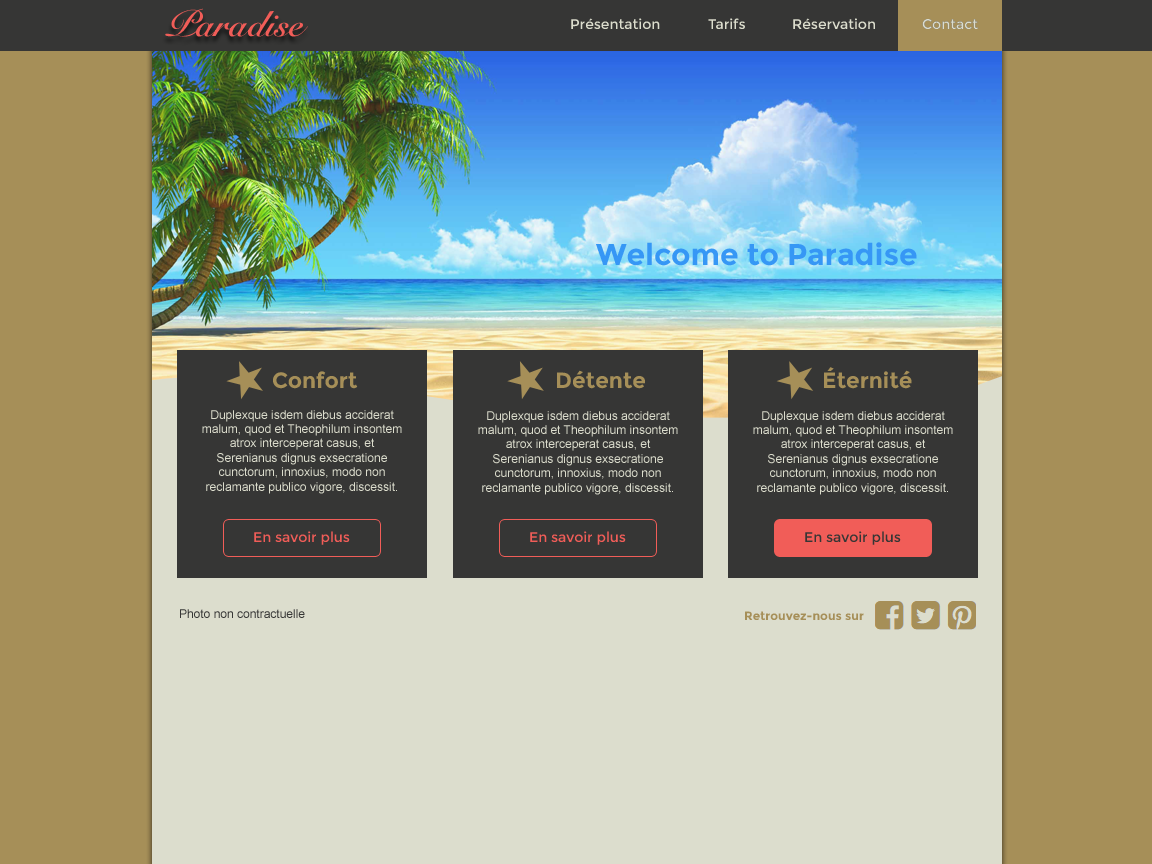
<style>
.page{position:relative;width:1152px;height:864px;background:#dcddcd}
.page>*{position:absolute;margin:0}
.t1{font:36px "SnellRoundhand-Bold";color:#f15d58}
.t2{font:14px "Montserrat-Regular";color:#dcddcd}
.t3{font:30px "Montserrat-Bold";color:#3697f5}
.t4{font:22px "Montserrat-Bold";color:#a68f58}
.t5{font:12px "ArialMT";color:#dcddcd}
.t6{font:14px "Montserrat-Regular";color:#f15d58}
.t7{font:14px "Montserrat-Regular";color:#f15d58;text-transform:uppercase}
.t8{font:14px "Montserrat-Regular";color:#363635}
.t9{font:14px "Montserrat-Regular";color:#363635;text-transform:uppercase}
.t10{font:12px "ArialMT";color:#363635}
.t11{font:12px "Montserrat-Bold";color:#a68f58}
</style>
<div class="page">
<p class="t1" style="left:165px;top:8px;width:143px;height:29px">Paradise</p>
<p class="t2" style="left:571px;top:18px;width:89px;height:11px">Présentation</p>
<p class="t2" style="left:708px;top:18px;width:37px;height:11px">Tarifs</p>
<p class="t2" style="left:793px;top:18px;width:82px;height:11px">Réservation</p>
<p class="t2" style="left:922px;top:19px;width:56px;height:10px">Contact</p>
<p class="t2" style="left:922px;top:19px;width:56px;height:10px">Contact</p>
<p class="t3" style="left:596px;top:242px;width:321px;height:24px">Welcome to Paradise</p>
<p class="t4" style="left:273px;top:371px;width:85px;height:18px">Confort</p>
<p class="t4" style="left:557px;top:370px;width:88px;height:19px">Détente</p>
<p class="t4" style="left:824px;top:367px;width:88px;height:22px">Éternité</p>
<p class="t5" style="left:202px;top:410px;width:200px;height:84px;text-align:center">Duplexque isdem diebus acciderat malum, quod et Theophilum insontem atrox interceperat casus, et Serenianus dignus exsecratione cunctorum, innoxius, modo non reclamante publico vigore, discessit.</p>
<p class="t5" style="left:478px;top:411px;width:200px;height:84px;text-align:center">Duplexque isdem diebus acciderat malum, quod et Theophilum insontem atrox interceperat casus, et Serenianus dignus exsecratione cunctorum, innoxius, modo non reclamante publico vigore, discessit.</p>
<p class="t5" style="left:753px;top:411px;width:200px;height:84px;text-align:center">Duplexque isdem diebus acciderat malum, quod et Theophilum insontem atrox interceperat casus, et Serenianus dignus exsecratione cunctorum, innoxius, modo non reclamante publico vigore, discessit.</p>
<p class="t6" style="left:254px;top:531px;width:96px;height:14px"><span class="t7">E</span>n savoir plus</p>
<p class="t6" style="left:530px;top:531px;width:96px;height:14px"><span class="t7">E</span>n savoir plus</p>
<p class="t8" style="left:805px;top:531px;width:96px;height:14px"><span class="t9">E</span>n savoir plus</p>
<p class="t10" style="left:180px;top:609px;width:125px;height:9px">Photo non contractuelle</p>
<p class="t11" style="left:745px;top:611px;width:119px;height:9px">Retrouvez-nous sur</p>
</div>
